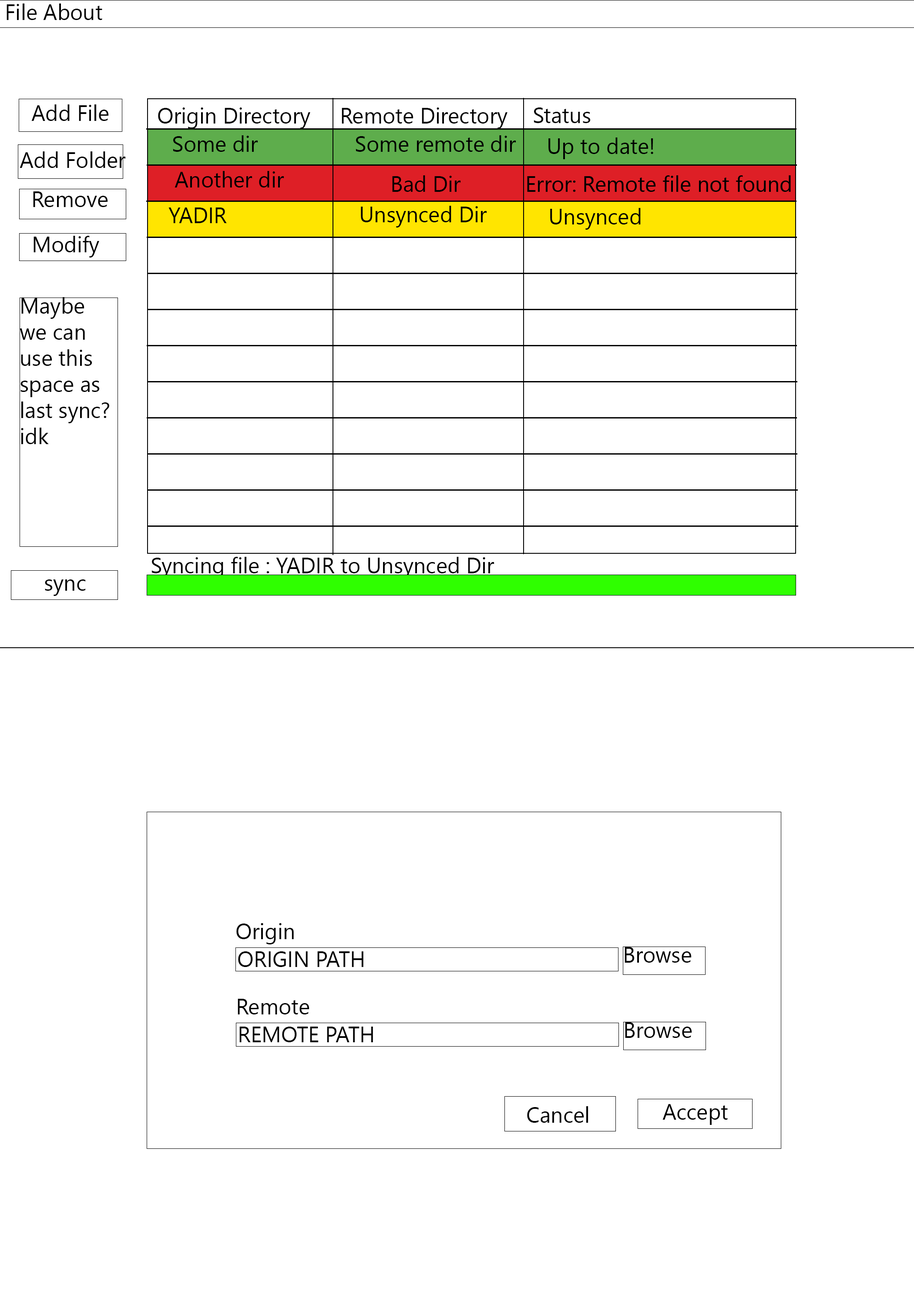
<style>
.page{position:relative;width:914px;height:1305px;background:#ffffff}
.page>*{position:absolute;margin:0}
.t1{font:21.8px "SegoeUI";color:#000000}
</style>
<div class="page">
<p class="t1" style="left:7px;top:3px;width:95px;height:17px">File About</p>
<p class="t1" style="left:31px;top:104px;width:78px;height:17px">Add File</p>
<p class="t1" style="left:158px;top:107px;width:152px;height:22px">Origin Directory</p>
<p class="t1" style="left:342px;top:107px;width:165px;height:22px">Remote Directory</p>
<p class="t1" style="left:533px;top:107px;width:57px;height:16px">Status</p>
<p class="t1" style="left:173px;top:135px;width:85px;height:17px">Some dir</p>
<p class="t1" style="left:355px;top:135px;width:161px;height:17px">Some remote dir</p>
<p class="t1" style="left:548px;top:137px;width:105px;height:22px">Up to date!</p>
<p class="t1" style="left:20px;top:151px;width:106px;height:17px">Add Folder</p>
<p class="t1" style="left:174px;top:171px;width:110px;height:17px">Another dir</p>
<p class="t1" style="left:392px;top:175px;width:69px;height:17px">Bad Dir</p>
<p class="t1" style="left:33px;top:191px;width:75px;height:16px">Remove</p>
<p class="t1" style="left:168px;top:208px;width:59px;height:15px">YADIR</p>
<p class="t1" style="left:361px;top:206px;width:126px;height:22px">Unsynced Dir</p>
<p class="t1" style="left:550px;top:208px;width:90px;height:22px">Unsynced</p>
<p class="t1" style="left:33px;top:236px;width:66px;height:22px">Modify</p>
<p class="t1" style="left:20px;top:297px;width:89px;height:147px">Maybe <br>we can use this space as last sync? idk</p>
<p class="t1" style="left:151px;top:557px;width:343px;height:22px">Syncing file : YADIR to Unsynced Dir</p>
<p class="t1" style="left:45px;top:579px;width:41px;height:17px">sync</p>
<p class="t1" style="left:236px;top:923px;width:58px;height:22px">Origin</p>
<p class="t1" style="left:238px;top:951px;width:125px;height:16px">ORIGIN PATH</p>
<p class="t1" style="left:624px;top:947px;width:67px;height:16px">Browse</p>
<p class="t1" style="left:238px;top:999px;width:71px;height:16px">Remote</p>
<p class="t1" style="left:625px;top:1022px;width:67px;height:16px">Browse</p>
<p class="t1" style="left:239px;top:1027px;width:134px;height:15px">REMOTE PATH</p>
<p class="t1" style="left:527px;top:1106px;width:61px;height:17px">Cancel</p>
<p class="t1" style="left:662px;top:1104px;width:65px;height:21px">Accept</p>
</div>
